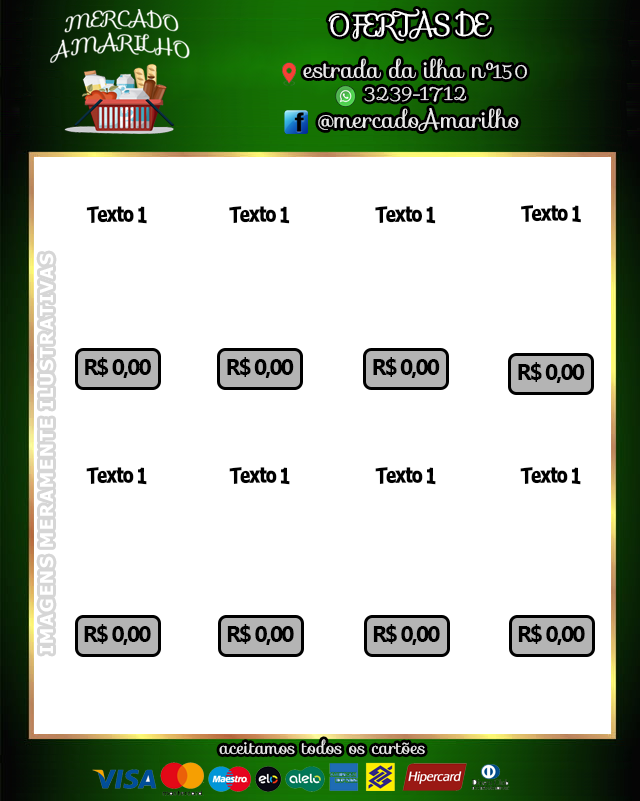
<style>
.page{position:relative;width:640px;height:801px;background:#ffffff}
.page>*{position:absolute;margin:0}
.t1{font:29px "Sofia-Regular";letter-spacing:-0.08em;color:#ffffff}
.t2{font:18.4px "Tahoma-Bold";letter-spacing:-0.08em;color:#000000}
.t3{font:18px "Tahoma-Bold";letter-spacing:0.1em;color:#ffffff}
.t4{font:22.6px "MicrosoftTaiLe-Bold";letter-spacing:-0.08em;color:#000000}
</style>
<div class="page">
<p class="t1" style="left:328px;top:9px;width:164px;height:32px">OFERTAS DE</p>
<p class="t2" style="left:86px;top:206px;width:61px;height:18px">Texto 1</p>
<p class="t2" style="left:229px;top:206px;width:61px;height:18px">Texto 1</p>
<p class="t2" style="left:375px;top:206px;width:61px;height:18px">Texto 1</p>
<p class="t2" style="left:521px;top:205px;width:60px;height:18px">Texto 1</p>
<p class="t3" style="left:39px;top:253px;width:15px;height:401px;rotate:-90deg;opacity:0.23">IMAGENS MERAMENTE ILUSTRATIVAS</p>
<p class="t4" style="left:85px;top:357px;width:66px;height:21px">R$ 0,00</p>
<p class="t4" style="left:227px;top:357px;width:67px;height:21px">R$ 0,00</p>
<p class="t4" style="left:373px;top:357px;width:67px;height:21px">R$ 0,00</p>
<p class="t4" style="left:518px;top:362px;width:67px;height:21px">R$ 0,00</p>
<p class="t2" style="left:86px;top:467px;width:61px;height:18px">Texto 1</p>
<p class="t2" style="left:229px;top:467px;width:61px;height:18px">Texto 1</p>
<p class="t2" style="left:375px;top:467px;width:61px;height:18px">Texto 1</p>
<p class="t2" style="left:520px;top:467px;width:61px;height:18px">Texto 1</p>
<p class="t4" style="left:84px;top:624px;width:67px;height:21px">R$ 0,00</p>
<p class="t4" style="left:227px;top:624px;width:67px;height:21px">R$ 0,00</p>
<p class="t4" style="left:373px;top:624px;width:67px;height:21px">R$ 0,00</p>
<p class="t4" style="left:518px;top:624px;width:67px;height:21px">R$ 0,00</p>
</div>
